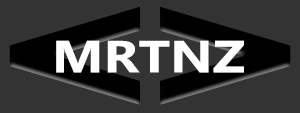
<style>
.page{position:relative;width:300px;height:113px;background:#333333}
.page>*{position:absolute;margin:0}
.t1{font:44.7px "MicrosoftNewTaiLue-Bold";color:#ffffff;scale:1.2 1}
</style>
<div class="page">
<p class="t1" style="left:56px;top:40px;width:188px;height:33px">MRTNZ</p>
</div>
